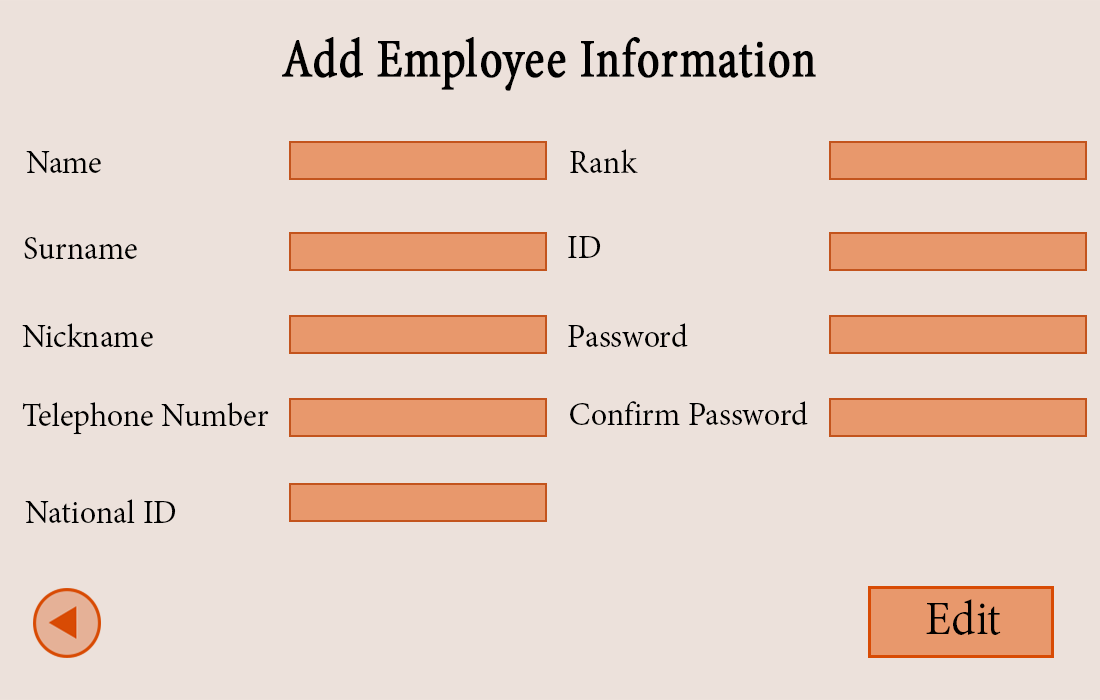
<style>
.page{position:relative;width:1100px;height:700px;background:#ece1db}
.page>*{position:absolute;margin:0}
.t1{font:65.6px "AdobeThai-Regular";letter-spacing:0.005em;color:#000000;font-weight:bold;scale:0.84 1}
.t2{font:40.1px "AdobeThai-Regular";color:#000000}
.t3{font:58.3px "AdobeThai-Regular";color:#000000}
</style>
<div class="page">
<p class="t1" style="left:282px;top:37px;width:534px;height:54px">Add Employee Information</p>
<p class="t2" style="left:570px;top:149px;width:68px;height:24px">Rank</p>
<p class="t2" style="left:26px;top:151px;width:75px;height:22px">Name</p>
<p class="t2" style="left:24px;top:237px;width:113px;height:22px">Surname</p>
<p class="t2" style="left:568px;top:236px;width:33px;height:22px">ID</p>
<p class="t2" style="left:22px;top:323px;width:131px;height:24px">Nickname</p>
<p class="t2" style="left:568px;top:323px;width:120px;height:24px">Password</p>
<p class="t2" style="left:570px;top:401px;width:238px;height:24px">Confirm Password</p>
<p class="t2" style="left:22px;top:402px;width:247px;height:33px">Telephone Number</p>
<p class="t2" style="left:25px;top:499px;width:151px;height:24px">National ID</p>
<p class="t3" style="left:926px;top:599px;width:75px;height:36px">Edit</p>
</div>
